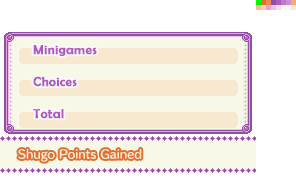
<style>
.page{position:relative;width:296px;height:192px;background:#ffffff}
.page>*{position:absolute;margin:0}
.t1{font:13px/32px "BerlinSansFB-Reg";letter-spacing:0.025em;color:#b058c0;font-weight:bold}
.t2{font:11px "HummingStd-D";letter-spacing:0.01em;color:#f8e8d0}
</style>
<div class="page">
<p class="t1" style="left:33px;top:45px;width:64px;height:74px">Minigames<br>Choices<br>Total</p>
<p class="t2" style="left:18px;top:148px;width:124px;height:14px">Shugo Points Gained</p>
</div>
